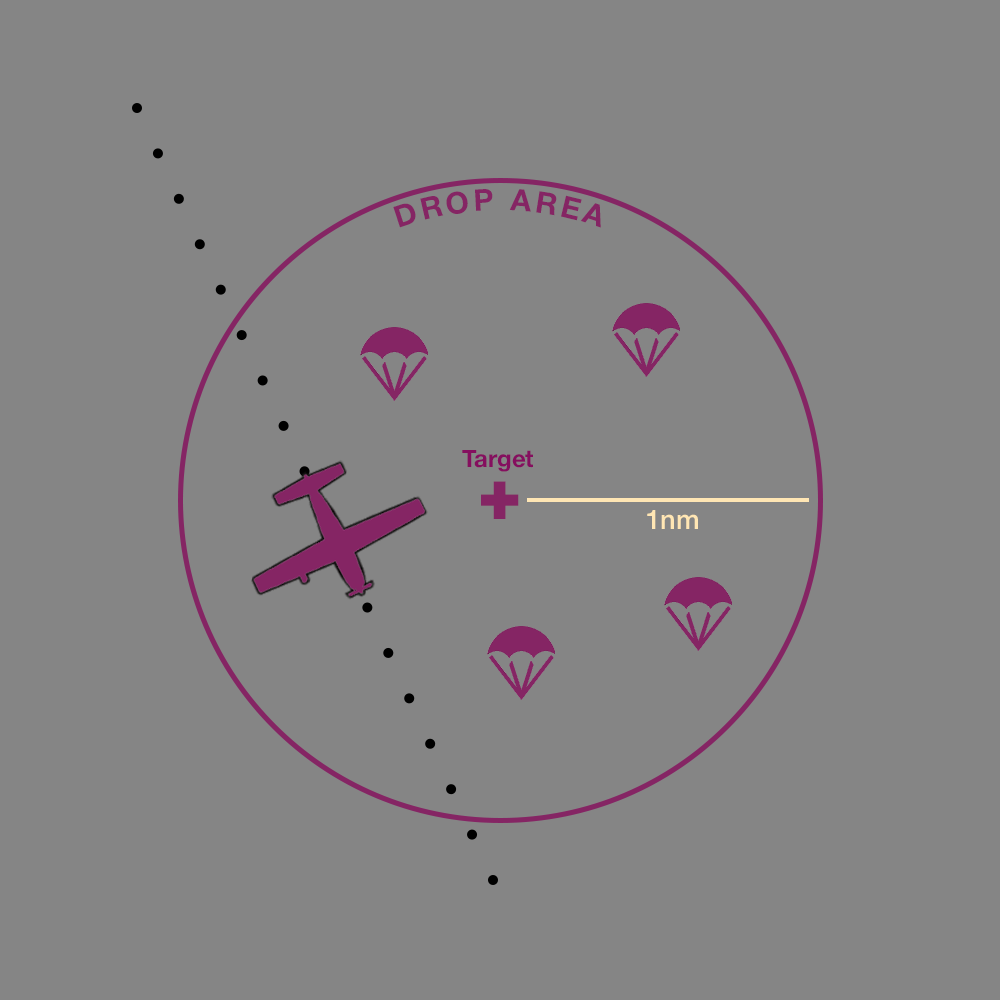
<style>
.page{position:relative;width:1000px;height:1000px;background:#858585}
.page>*{position:absolute;margin:0}
.t1{font:30px "HelveticaNeue-Bold";letter-spacing:0.2em;color:#852564}
.t2{font:24px "HelveticaNeue-Bold";color:#850f5f}
.t3{font:72px "HelveticaNeue-Black";letter-spacing:0.2em;color:#852564}
.t4{font:27px "HelveticaNeue-Medium";color:#ffe6b4}
</style>
<div class="page">
<p class="t1" style="left:393px;top:189px;width:208px;height:39px">DROP AREA</p>
<p class="t2" style="left:462px;top:450px;width:71px;height:22px">Target</p>
<p class="t3" style="left:481px;top:481px;width:38px;height:38px">+</p>
<p class="t4" style="left:647px;top:510px;width:51px;height:19px">1nm</p>
</div>
